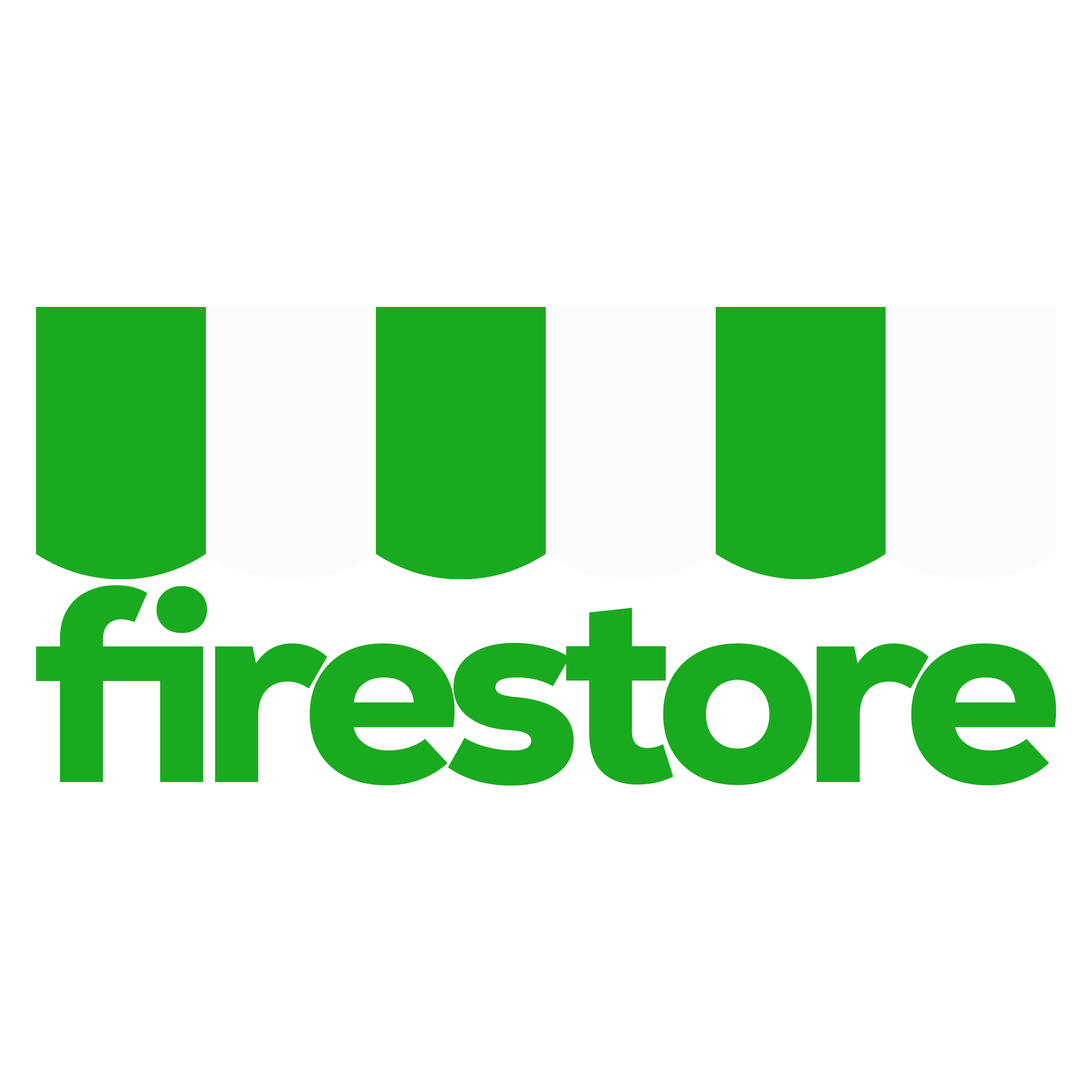
<style>
.page{position:relative;width:1092px;height:1092px;background:#ffffff}
.page>*{position:absolute;margin:0}
.t1{font:274.4px "Nexa-Heavy";letter-spacing:-0.075em;color:#1aaa1a}
</style>
<div class="page">
<p class="t1" style="left:36px;top:585px;width:1020px;height:201px">firestore</p>
</div>
